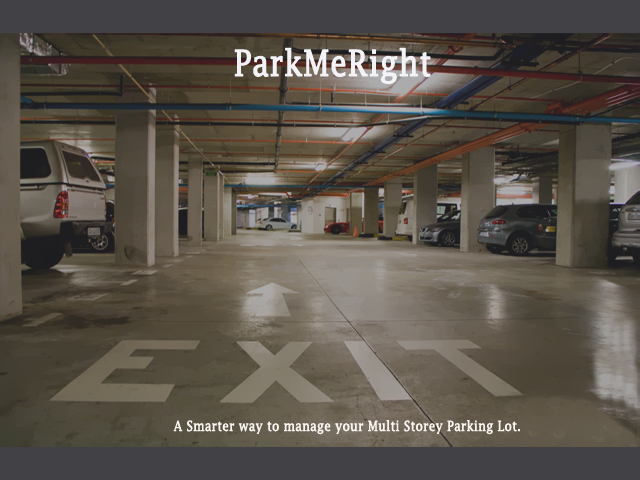
<style>
.page{position:relative;width:640px;height:480px}
.page>*{position:absolute;margin:0}
.t1{font:36px "LucidaFax";color:#f3f3f7;font-weight:bold;scale:0.83 1}
.t2{font:14px "LucidaFax";color:#f9f6f2;font-weight:bold;scale:0.83 1}
</style>
<div class="page">
<p class="t1" style="left:234px;top:47px;width:197px;height:37px">ParkMeRight</p>
<p class="t2" style="left:173px;top:420px;width:347px;height:15px">A Smarter way to manage your Multi Storey Parking Lot.</p>
</div>
